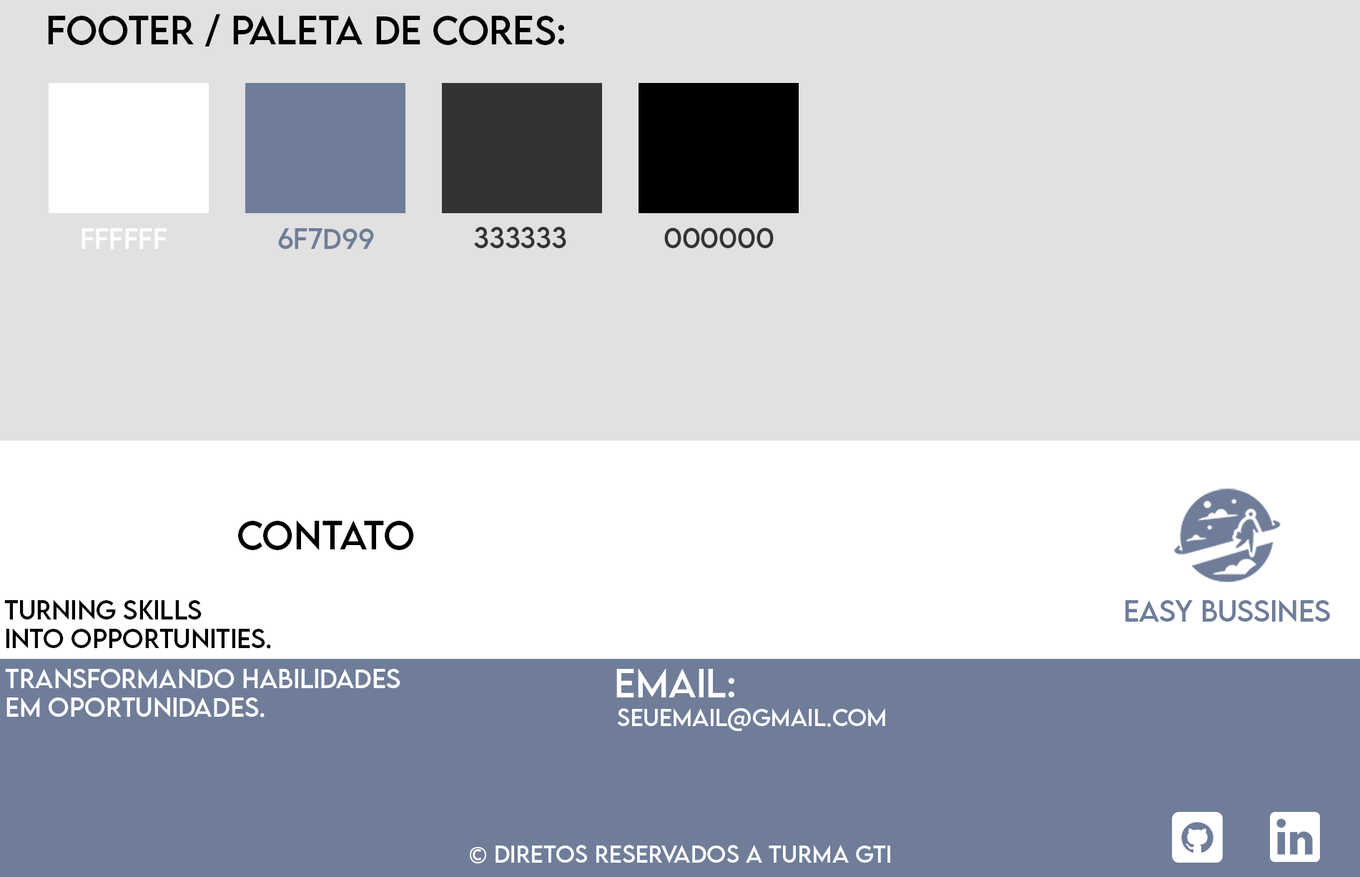
<style>
.page{position:relative;width:1360px;height:877px;background:#e1e1e1}
.page>*{position:absolute;margin:0}
.t1{font:35.8px "LEMONMILK-Regular";color:#000000;text-transform:uppercase}
.t2{font:25.7px "LEMONMILK-Regular";color:#ffffff;text-transform:uppercase}
.t3{font:25.7px "LEMONMILK-Regular";color:#6f7d99;text-transform:uppercase}
.t4{font:25.7px "LEMONMILK-Regular";color:#333333;text-transform:uppercase}
.t5{font:23.8px "LEMONMILK-Regular";color:#000000;text-transform:uppercase}
.t6{font:26.8px "LEMONMILK-Regular";color:#6f7d99;text-transform:uppercase}
.t7{font:23.8px "LEMONMILK-Regular";color:#ffffff;text-transform:uppercase}
.t8{font:35.8px "LEMONMILK-Regular";color:#ffffff;text-transform:uppercase}
.t9{font:21.7px "LEMONMILK-Regular";color:#ffffff;text-transform:uppercase}
</style>
<div class="page">
<p class="t1" style="left:48px;top:14px;width:516px;height:32px">Footer / paleta de cores:</p>
<p class="t2" style="left:82px;top:228px;width:85px;height:21px">ffffff</p>
<p class="t3" style="left:278px;top:228px;width:96px;height:21px">6f7d99</p>
<p class="t4" style="left:474px;top:227px;width:92px;height:21px">333333</p>
<p class="t4" style="left:664px;top:227px;width:110px;height:21px">000000</p>
<p class="t1" style="left:238px;top:520px;width:176px;height:30px">Contato</p>
<p class="t5" style="left:4px;top:599px;width:267px;height:50px">Turning Skills <br>into Opportunities.</p>
<p class="t6" style="left:1126px;top:599px;width:204px;height:22px">EASY BUSSINES</p>
<p class="t7" style="left:5px;top:668px;width:395px;height:49px">Transformando habilidades <br>em oportunidades.</p>
<p class="t8" style="left:616px;top:668px;width:118px;height:29px">Email:</p>
<p class="t9" style="left:617px;top:708px;width:268px;height:23px">SEUEMAIL@GMAIL.COM</p>
<p class="t9" style="left:470px;top:845px;width:420px;height:18px">© diretos reservados a turma gti</p>
</div>
